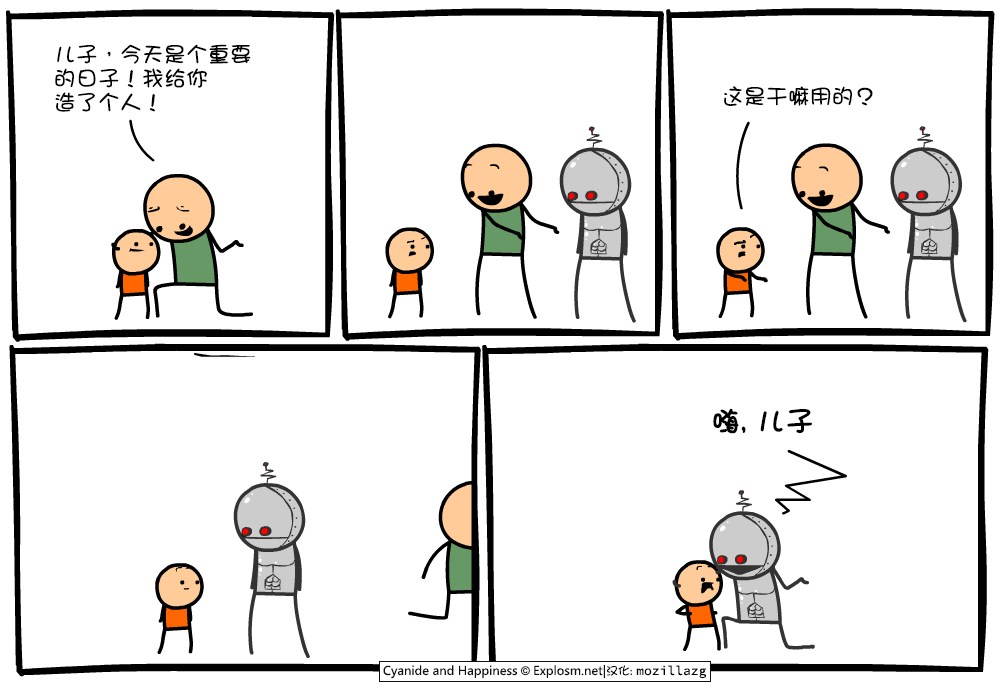
<style>
.page{position:relative;width:1000px;height:694px;background:#ffffff}
.page>*{position:absolute;margin:0}
.t1{font:22px/24px "DFGirl";color:#000000}
.t2{font:22px "DFGirl";color:#000000}
.t3{font:28px "DFGirl";color:#000000;font-weight:bold}
</style>
<div class="page">
<p class="t1" style="left:55px;top:44px;width:196px;height:68px">儿子，今天是个重要<br>的日子！我给你<br>造了个人！</p>
<p class="t2" style="left:724px;top:86px;width:149px;height:20px">这是干嘛用的？</p>
<p class="t3" style="left:713px;top:408px;width:100px;height:26px">嗨, 儿子</p>
</div>
